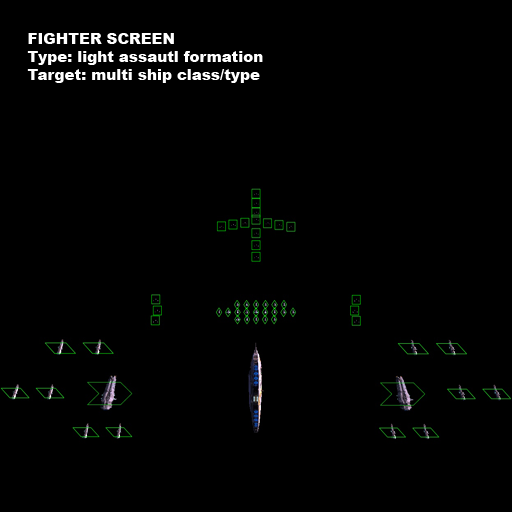
<style>
.page{position:relative;width:512px;height:512px;background:#000000}
.page>*{position:absolute;margin:0}
.t1{font:15px "Arial-Black";color:#ffffff}
</style>
<div class="page">
<p class="t1" style="left:27px;top:33px;width:236px;height:50px">FIGHTER SCREEN<br>Type: light assautl formation<br>Target: multi ship class/type</p>
</div>
